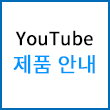
<style>
.page{position:relative;width:110px;height:110px;background:#ffffff}
.page>*{position:absolute;margin:0}
.t1{font:18px "NotoSansCJKkr-Regular";color:#000000;font-weight:bold}
.t2{font:20.8px "NotoSansCJKkr-Regular";color:#0096ff;font-weight:bold}
</style>
<div class="page">
<p class="t1" style="left:15px;top:30px;width:78px;height:16px">YouTube</p>
<p class="t2" style="left:13px;top:54px;width:82px;height:20px">제품 안내</p>
</div>
